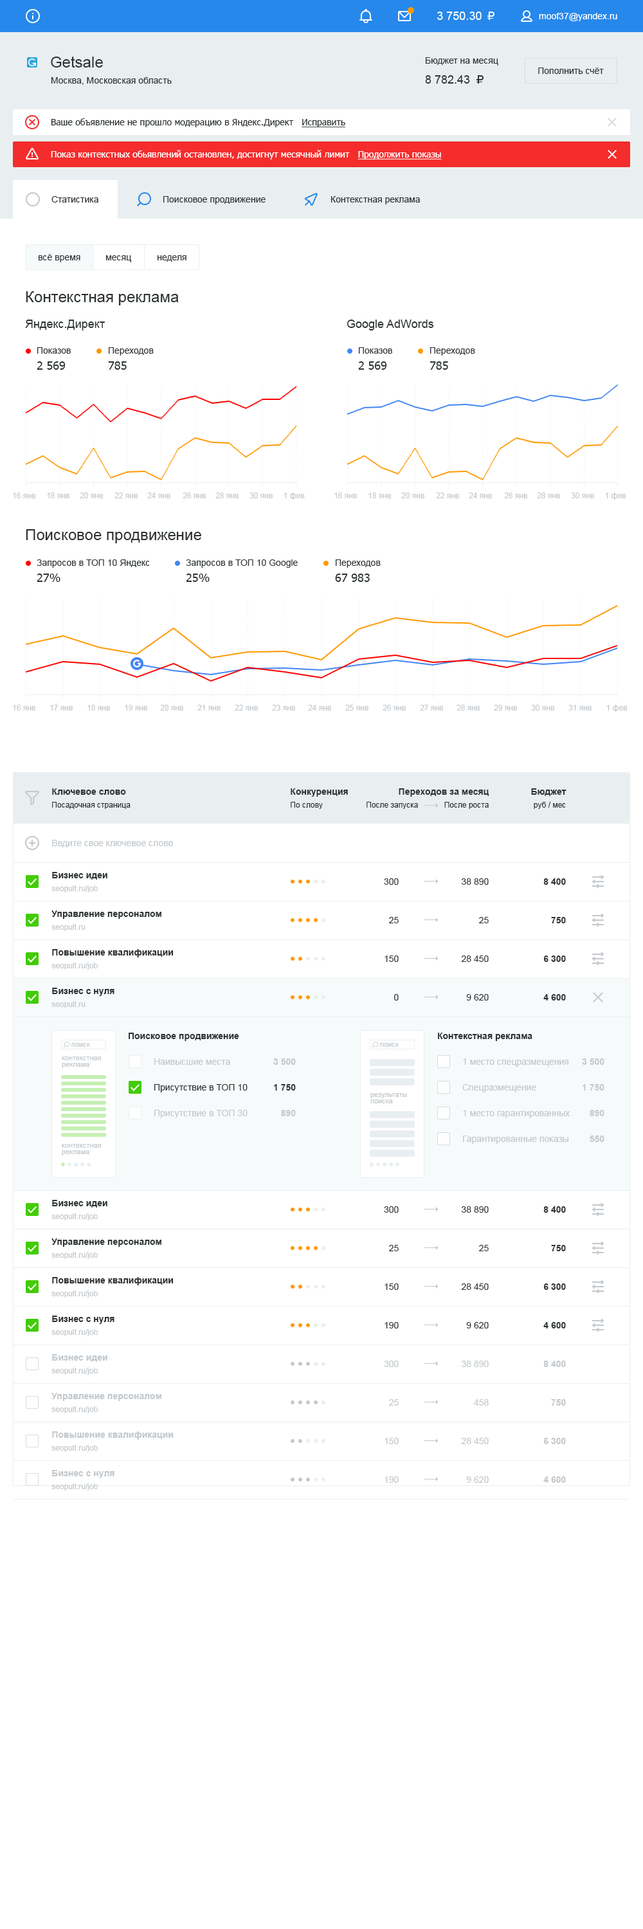
<style>
.page{position:relative;width:643px;height:1929px;background:#ffffff}
.page>*{position:absolute;margin:0}
.t1{font:11.6px "ArialMT";color:#ffffff}
.t2{font:9px "ArialMT";color:#ffffff}
.t3{font:15.4px "ArialMT";color:#2c3133}
.t4{font:9px "ArialMT";color:#2c3133}
.t5{font:11.6px "ArialMT";color:#2c3133}
.t6{font:9px "Tahoma";color:#2c3133}
.t7{font:9px "Tahoma";color:#2c3133;text-decoration:underline}
.t8{font:9px "Tahoma";color:#ffffff}
.t9{font:9px "Tahoma";color:#ffffff;text-decoration:underline}
.t10{font:9px "ArialMT";color:#313436}
.t11{font:11.6px "Tahoma";color:#2c3133}
.t12{font:7.7px "ArialMT";color:#c3c8cc}
.t13{font:9px "Arial-BoldMT";color:#2c3133}
.t14{font:7.7px "ArialMT";color:#2c3133}
.t15{font:9px "ArialMT";color:#c3c8cc}
.t16{font:7.1px "ArialMT";color:#c3c8cc}
.t17{font:7.1px/6.4px "ArialMT";color:#c3c8cc}
.t18{font:9px/25.7px "ArialMT";color:#2c3133}
.t19{font:9px/25.7px "ArialMT";color:#c3c8cc}
.t20{font:9px/25.7px "Arial-BoldMT";color:#c3c8cc}
.t21{font:9px/25.7px "Arial-BoldMT";color:#2c3133}
.t22{font:9px "Arial-BoldMT";color:#c3c8cc}
</style>
<div class="page">
<p class="t1" style="left:437px;top:12px;width:45px;height:8px">3 750.30</p>
<p class="t2" style="left:539px;top:13px;width:78px;height:8px">moof37@yandex.ru</p>
<p class="t3" style="left:51px;top:56px;width:52px;height:12px">Getsale</p>
<p class="t4" style="left:426px;top:57px;width:72px;height:9px">Бюджет на месяц</p>
<p class="t4" style="left:51px;top:77px;width:121px;height:8px">Москва, Московская область</p>
<p class="t5" style="left:425px;top:75px;width:45px;height:9px">8 782.43</p>
<p class="t4" style="left:538px;top:68px;width:66px;height:6px">Пополнить счёт</p>
<p class="t6" style="left:51px;top:118px;width:294px;height:9px">Ваше объявление не прошло модерацию в Яндекс.Директ   <span class="t7">Исправить</span></p>
<p class="t8" style="left:51px;top:150px;width:391px;height:9px">Показ контекстных обьявлений остановлен, достигнут месячный лимит   <span class="t9">Продолжить показы</span></p>
<p class="t4" style="left:51px;top:196px;width:47px;height:7px">Статистика</p>
<p class="t4" style="left:163px;top:196px;width:103px;height:8px">Поисковое продвижение</p>
<p class="t4" style="left:331px;top:196px;width:89px;height:8px">Контекстная реклама</p>
<p class="t10" style="left:39px;top:254px;width:41px;height:8px">всё время</p>
<p class="t10" style="left:106px;top:255px;width:25px;height:7px">месяц</p>
<p class="t10" style="left:158px;top:255px;width:28px;height:7px">неделя</p>
<p class="t3" style="left:26px;top:291px;width:153px;height:14px">Контекстная реклама</p>
<p class="t5" style="left:25px;top:320px;width:80px;height:10px">Яндекс.Директ</p>
<p class="t5" style="left:346px;top:320px;width:88px;height:10px">Google AdWords</p>
<p class="t4" style="left:37px;top:347px;width:34px;height:7px">Показов</p>
<p class="t4" style="left:109px;top:347px;width:45px;height:9px">Переходов</p>
<p class="t4" style="left:359px;top:347px;width:33px;height:7px">Показов</p>
<p class="t4" style="left:430px;top:347px;width:45px;height:9px">Переходов</p>
<p class="t11" style="left:37px;top:361px;width:29px;height:9px">2 569</p>
<p class="t11" style="left:108px;top:361px;width:19px;height:9px">785</p>
<p class="t11" style="left:358px;top:361px;width:29px;height:9px">2 569</p>
<p class="t11" style="left:429px;top:361px;width:19px;height:9px">785</p>
<p class="t12" style="left:13px;top:492px;width:22px;height:6px">16 янв</p>
<p class="t12" style="left:47px;top:492px;width:22px;height:6px">18 янв</p>
<p class="t12" style="left:80px;top:492px;width:23px;height:6px">20 янв</p>
<p class="t12" style="left:114px;top:492px;width:24px;height:6px">22 янв</p>
<p class="t12" style="left:147px;top:492px;width:23px;height:6px">24 янв</p>
<p class="t12" style="left:183px;top:492px;width:23px;height:6px">26 янв</p>
<p class="t12" style="left:215px;top:492px;width:24px;height:6px">28 янв</p>
<p class="t12" style="left:249px;top:492px;width:24px;height:6px">30 янв</p>
<p class="t12" style="left:284px;top:492px;width:21px;height:8px">1 фев</p>
<p class="t12" style="left:334px;top:492px;width:23px;height:6px">16 янв</p>
<p class="t12" style="left:368px;top:492px;width:23px;height:6px">18 янв</p>
<p class="t12" style="left:401px;top:492px;width:23px;height:6px">20 янв</p>
<p class="t12" style="left:436px;top:492px;width:23px;height:6px">22 янв</p>
<p class="t12" style="left:469px;top:492px;width:23px;height:6px">24 янв</p>
<p class="t12" style="left:504px;top:492px;width:23px;height:6px">26 янв</p>
<p class="t12" style="left:537px;top:492px;width:23px;height:6px">28 янв</p>
<p class="t12" style="left:571px;top:492px;width:23px;height:6px">30 янв</p>
<p class="t12" style="left:605px;top:492px;width:21px;height:8px">1 фев</p>
<p class="t3" style="left:26px;top:529px;width:175px;height:14px">Поисковое продвижение</p>
<p class="t4" style="left:37px;top:559px;width:113px;height:9px">Запросов в ТОП 10 Яндекс</p>
<p class="t4" style="left:186px;top:559px;width:112px;height:9px">Запросов в ТОП 10 Google</p>
<p class="t4" style="left:336px;top:559px;width:45px;height:9px">Переходов</p>
<p class="t11" style="left:37px;top:573px;width:23px;height:9px">27%</p>
<p class="t11" style="left:186px;top:573px;width:24px;height:9px">25%</p>
<p class="t11" style="left:335px;top:573px;width:35px;height:9px">67 983</p>
<p class="t12" style="left:13px;top:705px;width:22px;height:5px">16 янв</p>
<p class="t12" style="left:50px;top:705px;width:23px;height:5px">17 янв</p>
<p class="t12" style="left:87px;top:705px;width:23px;height:5px">18 янв</p>
<p class="t12" style="left:125px;top:705px;width:22px;height:5px">19 янв</p>
<p class="t12" style="left:160px;top:705px;width:23px;height:5px">20 янв</p>
<p class="t12" style="left:197px;top:705px;width:24px;height:5px">21 янв</p>
<p class="t12" style="left:235px;top:705px;width:23px;height:5px">22 янв</p>
<p class="t12" style="left:272px;top:705px;width:23px;height:5px">23 янв</p>
<p class="t12" style="left:308px;top:705px;width:23px;height:5px">24 янв</p>
<p class="t12" style="left:345px;top:705px;width:23px;height:5px">25 янв</p>
<p class="t12" style="left:382px;top:705px;width:24px;height:5px">26 янв</p>
<p class="t12" style="left:420px;top:705px;width:23px;height:5px">27 янв</p>
<p class="t12" style="left:456px;top:705px;width:24px;height:5px">28 янв</p>
<p class="t12" style="left:494px;top:705px;width:23px;height:5px">29 янв</p>
<p class="t12" style="left:531px;top:705px;width:23px;height:5px">30 янв</p>
<p class="t12" style="left:568px;top:705px;width:23px;height:5px">31 янв</p>
<p class="t12" style="left:606px;top:705px;width:21px;height:7px">1 фев</p>
<p class="t13" style="left:52px;top:788px;width:74px;height:7px">Ключевое слово</p>
<p class="t13" style="left:291px;top:788px;width:57px;height:9px">Конкуренция</p>
<p class="t13" style="left:399px;top:788px;width:90px;height:9px">Переходов за месяц</p>
<p class="t13" style="left:531px;top:788px;width:35px;height:8px">Бюджет</p>
<p class="t14" style="left:52px;top:802px;width:78px;height:7px">Посадочная страница</p>
<p class="t14" style="left:291px;top:802px;width:32px;height:7px">По слову</p>
<p class="t14" style="left:366px;top:802px;width:52px;height:7px">После запуска</p>
<p class="t14" style="left:444px;top:802px;width:45px;height:7px">После роста</p>
<p class="t14" style="left:534px;top:802px;width:32px;height:7px">руб / мес</p>
<p class="t15" style="left:52px;top:840px;width:121px;height:7px">Ввдите свое ключевое слово</p>
<p class="t13" style="left:52px;top:872px;width:55px;height:7px">Бизнес идеи</p>
<p class="t4" style="left:384px;top:878px;width:15px;height:7px">300</p>
<p class="t4" style="left:462px;top:878px;width:27px;height:7px">38 890</p>
<p class="t13" style="left:543px;top:878px;width:23px;height:7px">8 400</p>
<p class="t12" style="left:51px;top:885px;width:47px;height:7px">seopult.ru/job</p>
<p class="t13" style="left:51px;top:910px;width:110px;height:9px">Управление персоналом</p>
<p class="t4" style="left:389px;top:917px;width:10px;height:6px">25</p>
<p class="t4" style="left:479px;top:917px;width:10px;height:6px">25</p>
<p class="t13" style="left:551px;top:917px;width:15px;height:6px">750</p>
<p class="t12" style="left:51px;top:924px;width:35px;height:7px">seopult.ru</p>
<p class="t13" style="left:52px;top:949px;width:122px;height:8px">Повышение квалификации</p>
<p class="t12" style="left:51px;top:962px;width:47px;height:7px">seopult.ru/job</p>
<p class="t4" style="left:384px;top:955px;width:15px;height:7px">150</p>
<p class="t4" style="left:461px;top:955px;width:28px;height:7px">28 450</p>
<p class="t13" style="left:543px;top:955px;width:23px;height:7px">6 300</p>
<p class="t13" style="left:52px;top:987px;width:62px;height:9px">Бизнес с нуля</p>
<p class="t12" style="left:51px;top:1001px;width:35px;height:7px">seopult.ru</p>
<p class="t4" style="left:394px;top:994px;width:5px;height:6px">0</p>
<p class="t4" style="left:466px;top:994px;width:23px;height:6px">9 620</p>
<p class="t13" style="left:543px;top:994px;width:23px;height:6px">4 600</p>
<p class="t13" style="left:129px;top:1032px;width:110px;height:9px">Поисковое продвижение</p>
<p class="t13" style="left:438px;top:1032px;width:94px;height:9px">Контекстная реклама</p>
<p class="t16" style="left:71px;top:1043px;width:19px;height:4px">поиск</p>
<p class="t16" style="left:380px;top:1043px;width:19px;height:4px">поиск</p>
<p class="t17" style="left:62px;top:1056px;width:40px;height:12px">контекстная <br>реклама</p>
<p class="t18" style="left:154px;top:1058px;width:94px;height:60px"><span class="t19">Наивысшие места<br></span>Присутствие в ТОП 10<br><span class="t19">Присутствие в ТОП 30</span></p>
<p class="t20" style="left:273px;top:1058px;width:23px;height:58px;text-align:right">3 500<br><span class="t21">1 750<br></span>890</p>
<p class="t19" style="left:462px;top:1058px;width:108px;height:86px">1 место спецразмещения<br>Спецразмещение<br>1 место гарантированных<br>Гарантированные показы</p>
<p class="t20" style="left:582px;top:1058px;width:22px;height:84px;text-align:right">3 500<br>1 750<br>890<br>550</p>
<p class="t17" style="left:370px;top:1093px;width:37px;height:10px">результаты <br>поиска</p>
<p class="t17" style="left:62px;top:1144px;width:40px;height:11px">контекстная <br>реклама</p>
<p class="t13" style="left:52px;top:1200px;width:55px;height:7px">Бизнес идеи</p>
<p class="t4" style="left:384px;top:1206px;width:15px;height:6px">300</p>
<p class="t4" style="left:462px;top:1206px;width:27px;height:6px">38 890</p>
<p class="t13" style="left:543px;top:1206px;width:23px;height:6px">8 400</p>
<p class="t12" style="left:51px;top:1213px;width:47px;height:7px">seopult.ru/job</p>
<p class="t13" style="left:51px;top:1238px;width:110px;height:8px">Управление персоналом</p>
<p class="t12" style="left:51px;top:1252px;width:47px;height:7px">seopult.ru/job</p>
<p class="t4" style="left:389px;top:1245px;width:10px;height:6px">25</p>
<p class="t4" style="left:479px;top:1245px;width:10px;height:6px">25</p>
<p class="t13" style="left:551px;top:1245px;width:15px;height:6px">750</p>
<p class="t13" style="left:52px;top:1277px;width:122px;height:8px">Повышение квалификации</p>
<p class="t4" style="left:384px;top:1283px;width:15px;height:7px">150</p>
<p class="t4" style="left:461px;top:1283px;width:28px;height:7px">28 450</p>
<p class="t13" style="left:543px;top:1283px;width:23px;height:7px">6 300</p>
<p class="t12" style="left:51px;top:1290px;width:47px;height:7px">seopult.ru/job</p>
<p class="t13" style="left:52px;top:1315px;width:62px;height:9px">Бизнес с нуля</p>
<p class="t4" style="left:384px;top:1322px;width:15px;height:6px">190</p>
<p class="t4" style="left:466px;top:1322px;width:23px;height:6px">9 620</p>
<p class="t13" style="left:543px;top:1322px;width:23px;height:6px">4 600</p>
<p class="t12" style="left:51px;top:1329px;width:47px;height:7px">seopult.ru/job</p>
<p class="t22" style="left:52px;top:1354px;width:55px;height:8px">Бизнес идеи</p>
<p class="t15" style="left:384px;top:1360px;width:15px;height:7px">300</p>
<p class="t15" style="left:462px;top:1360px;width:27px;height:7px">38 890</p>
<p class="t22" style="left:543px;top:1360px;width:23px;height:7px">8 400</p>
<p class="t12" style="left:51px;top:1367px;width:47px;height:7px">seopult.ru/job</p>
<p class="t22" style="left:51px;top:1392px;width:110px;height:9px">Управление персоналом</p>
<p class="t12" style="left:51px;top:1406px;width:47px;height:7px">seopult.ru/job</p>
<p class="t15" style="left:389px;top:1399px;width:10px;height:6px">25</p>
<p class="t15" style="left:474px;top:1399px;width:15px;height:6px">458</p>
<p class="t22" style="left:551px;top:1399px;width:15px;height:6px">750</p>
<p class="t22" style="left:52px;top:1431px;width:122px;height:8px">Повышение квалификации</p>
<p class="t12" style="left:51px;top:1444px;width:47px;height:8px">seopult.ru/job</p>
<p class="t15" style="left:384px;top:1437px;width:15px;height:7px">150</p>
<p class="t15" style="left:461px;top:1437px;width:28px;height:7px">28 450</p>
<p class="t22" style="left:543px;top:1437px;width:23px;height:7px">6 300</p>
<p class="t22" style="left:52px;top:1470px;width:62px;height:8px">Бизнес с нуля</p>
<p class="t15" style="left:384px;top:1476px;width:15px;height:6px">190</p>
<p class="t15" style="left:466px;top:1476px;width:23px;height:6px">9 620</p>
<p class="t22" style="left:543px;top:1476px;width:23px;height:6px">4 600</p>
<p class="t12" style="left:51px;top:1483px;width:47px;height:7px">seopult.ru/job</p>
</div>
